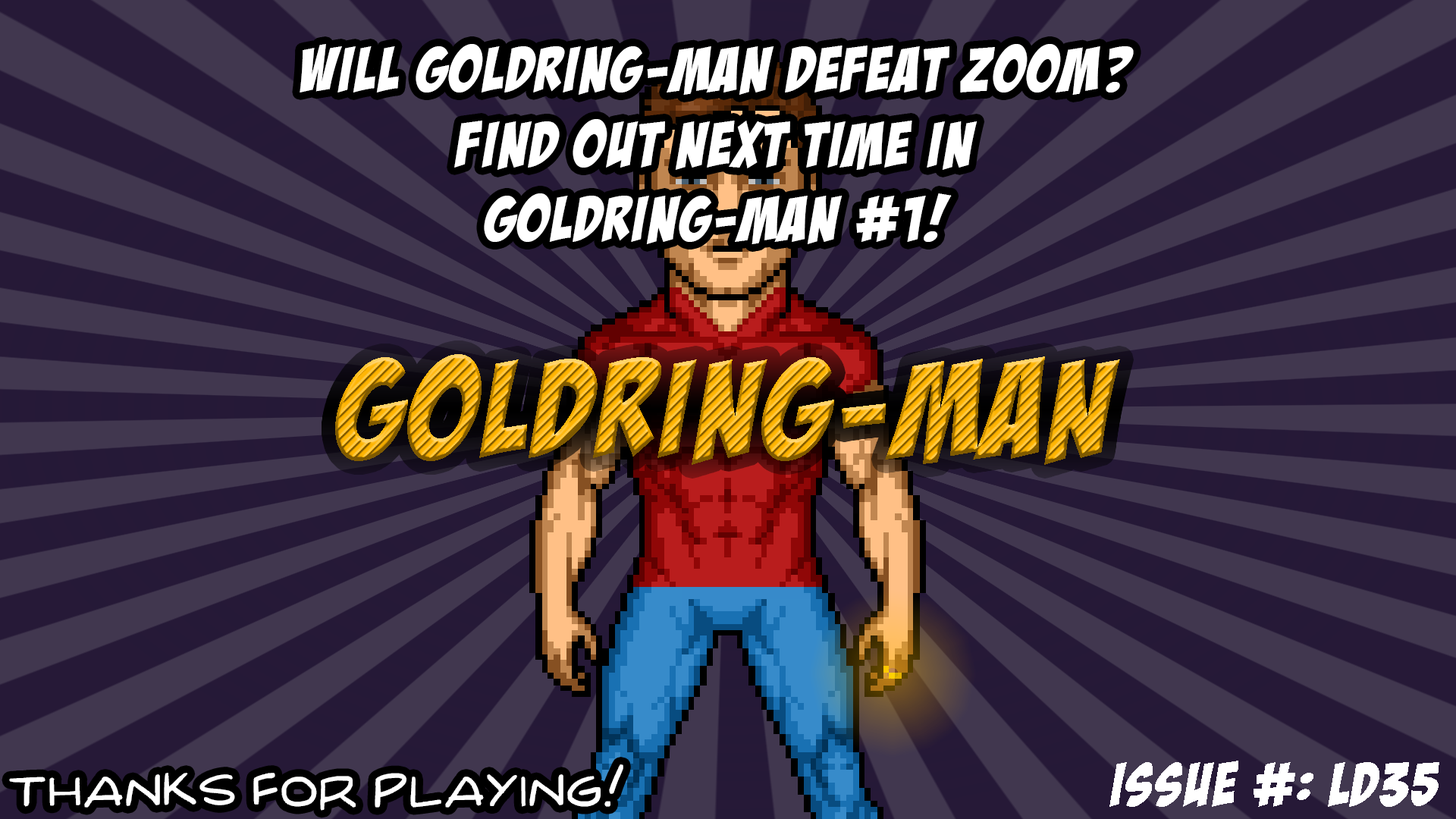
<style>
.page{position:relative;width:1456px;height:819px;background:#41374f}
.page>*{position:absolute;margin:0}
.t1{font:62.2px "BadaBoomBB";letter-spacing:0.05em;color:#ffffff}
.t2{font:136.5px "BadaBoomBB";letter-spacing:0.05em}
.t3{font:60.7px "BadaBoomBB";letter-spacing:0.05em;color:#ffffff}
.t4{font:40.9px "Deeko-Comic-Regular";letter-spacing:0.05em;color:#ffffff}
</style>
<div class="page">
<p class="t1" style="left:300px;top:44px;width:834px;height:200px;text-align:center">Will GoldRing-man defeat zoom?<br>Find out next time in<br>Goldring-man #1!</p>
<p class="t2" style="left:335px;top:354px;width:785px;height:111px">GOLDRING-MAN</p>
<p class="t3" style="left:1109px;top:761px;width:330px;height:46px">Issue #: LD35</p>
<p class="t4" style="left:9px;top:764px;width:614px;height:47px">Thanks for playing!</p>
</div>
